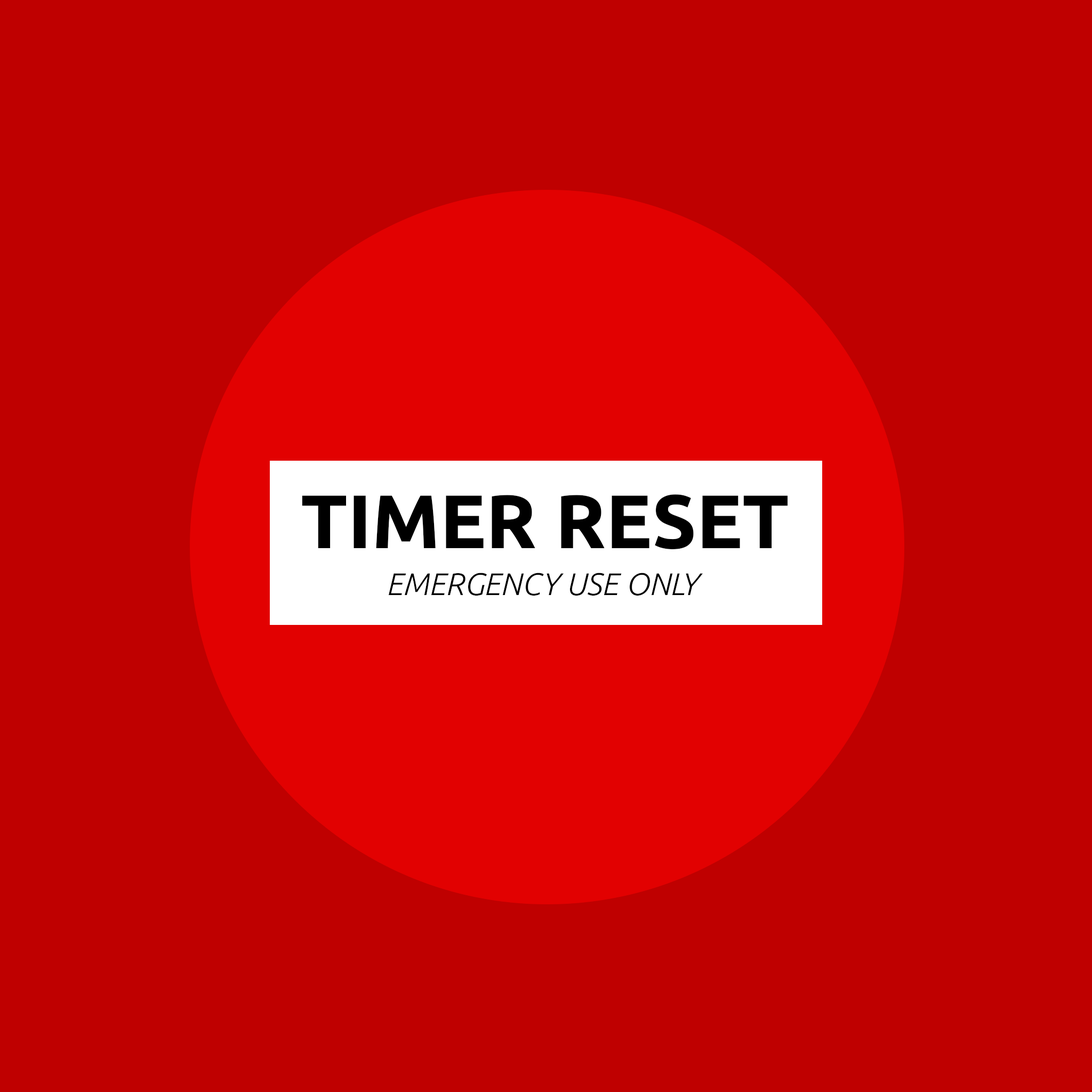
<style>
.page{position:relative;width:1092px;height:1092px;background:#bf0000}
.page>*{position:absolute;margin:0}
.t1{font:75.9px "Ubuntu-Bold";letter-spacing:0.001em;color:#000000}
.t2{font:31.2px "Ubuntu-LightItalic";letter-spacing:0.001em;color:#000000}
</style>
<div class="page">
<p class="t1" style="left:302px;top:494px;width:486px;height:55px">TIMER RESET</p>
<p class="t2" style="left:389px;top:573px;width:314px;height:23px">EMERGENCY USE ONLY</p>
</div>
